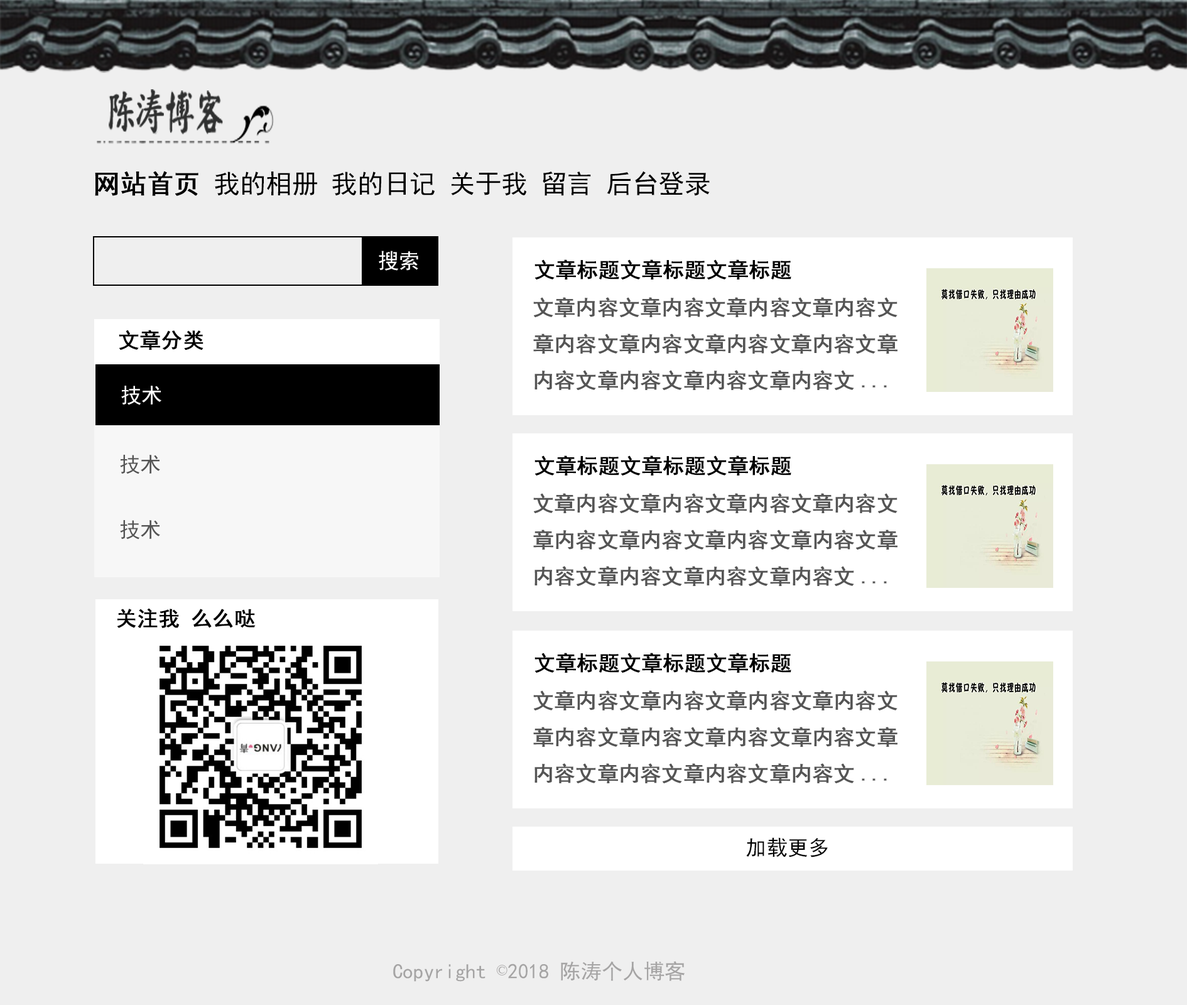
<style>
.page{position:relative;width:1187px;height:1005px;background:#efefef}
.page>*{position:absolute;margin:0}
.t1{font:47.7px "AdobeKaitiStd-Regular";letter-spacing:-0.1em;color:#2f3030;scale:0.65 1}
.t2{font:26.2px "SimHei";color:#000000}
.t3{font:26.2px "SimHei";color:#000000;font-weight:bold}
.t4{font:20.9px "SimHei";color:#fefefe}
.t5{font:20.9px "SimHei";color:#000000;font-weight:bold}
.t6{font:20.9px "SimHei";color:#555555;font-weight:bold}
.t7{font:20.9px "SimHei";color:#555555}
.t8{font:20.9px "SimHei";color:#000000}
.t9{font:20.9px "SimHei";color:#a5a4a4}
.t10{font:20.9px "SimSun";color:#a5a4a4}
</style>
<div class="page">
<p class="t1" style="left:109px;top:89px;width:55px;height:45px">陈涛</p>
<p class="t1" style="left:110px;top:89px;width:54px;height:45px">陈涛</p>
<p class="t2" style="left:95px;top:171px;width:615px;height:25px"><span class="t3">网站首页</span> 我的相册 我的日记 关于我 留言 后台登录</p>
<p class="t4" style="left:379px;top:251px;width:39px;height:20px">搜索</p>
<p class="t5" style="left:534px;top:259px;width:257px;height:20px">文章标题文章标题文章标题</p>
<p class="t6" style="left:533px;top:297px;width:364px;height:93px">文章内容文章内容文章内容文章内容文<br>章内容文章内容文章内容文章内容文章<br>内容文章内容文章内容文章内容文...</p>
<p class="t5" style="left:119px;top:330px;width:84px;height:20px">文章分类</p>
<p class="t4" style="left:121px;top:386px;width:40px;height:19px">技术</p>
<p class="t7" style="left:120px;top:455px;width:40px;height:19px">技术</p>
<p class="t5" style="left:534px;top:455px;width:257px;height:20px">文章标题文章标题文章标题</p>
<p class="t6" style="left:533px;top:493px;width:364px;height:93px">文章内容文章内容文章内容文章内容文<br>章内容文章内容文章内容文章内容文章<br>内容文章内容文章内容文章内容文...</p>
<p class="t7" style="left:120px;top:520px;width:40px;height:19px">技术</p>
<p class="t5" style="left:117px;top:608px;width:139px;height:20px">关注我 么么哒</p>
<p class="t5" style="left:534px;top:652px;width:257px;height:21px">文章标题文章标题文章标题</p>
<p class="t6" style="left:533px;top:690px;width:364px;height:93px">文章内容文章内容文章内容文章内容文<br>章内容文章内容文章内容文章内容文章<br>内容文章内容文章内容文章内容文...</p>
<p class="t8" style="left:746px;top:837px;width:82px;height:20px">加载更多</p>
<p class="t9" style="left:393px;top:961px;width:291px;height:20px">Copyright <span class="t10">©</span>2018 陈涛个人博客</p>
</div>
